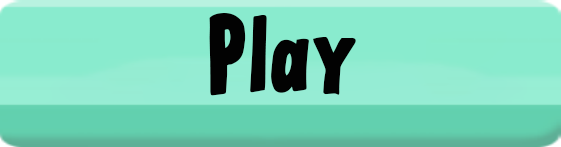
<style>
.page{position:relative;width:561px;height:147px;background:#89ebce}
.page>*{position:absolute;margin:0}
.t1{font:104.2px "LuTunaFREE";color:#020202}
</style>
<div class="page">
<p class="t1" style="left:209px;top:13px;width:147px;height:83px">Play</p>
</div>
